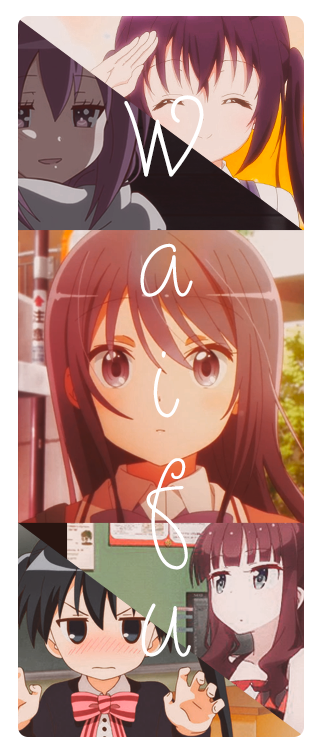
<style>
.page{position:relative;width:320px;height:756px}
.page>*{position:absolute;margin:0}
.t1{font:100px "Quirlycues";color:#ffffff}
</style>
<div class="page">
<p class="t1" style="left:124px;top:95px;width:80px;height:562px;text-align:center">W<br>a<br>i<br>f<br>u</p>
</div>
